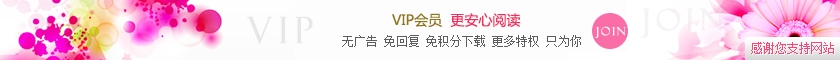
<style>
.page{position:relative;width:840px;height:60px;background:#fdfdfd}
.page>*{position:absolute;margin:0}
.t1{font:36px "FelixTitlingMT";letter-spacing:0.16em;color:#e7e7e7;font-weight:bold}
.t2{font:14px "MicrosoftYaHei";color:#937611;text-transform:uppercase}
.t3{font:14px "MicrosoftYaHei";color:#fa2a5b;text-transform:uppercase}
.t4{font:30px "FelixTitlingMT";letter-spacing:0.16em;color:#e8dee6;font-weight:bold}
.t5{font:11px "FelixTitlingMT";letter-spacing:0.16em;color:#ffffff;font-weight:bold}
.t6{font:12px "SimSun";color:#5d5b5c;text-transform:uppercase}
.t7{font:12px "SimSun";color:#fb4574;text-transform:uppercase}
</style>
<div class="page">
<p class="t1" style="left:247px;top:16px;width:66px;height:28px">VIP</p>
<p class="t2" style="left:392px;top:13px;width:129px;height:14px">vip会员  <span class="t3">更安心阅读</span></p>
<p class="t4" style="left:639px;top:8px;width:84px;height:30px;opacity:0.38">JOIN</p>
<p class="t5" style="left:595px;top:26px;width:31px;height:12px">JOIN</p>
<p class="t6" style="left:342px;top:35px;width:239px;height:12px">无广告 免回复 免积分下载 更多特权 只为你</p>
<p class="t7" style="left:751px;top:42px;width:83px;height:12px">感谢您支持网站</p>
</div>
